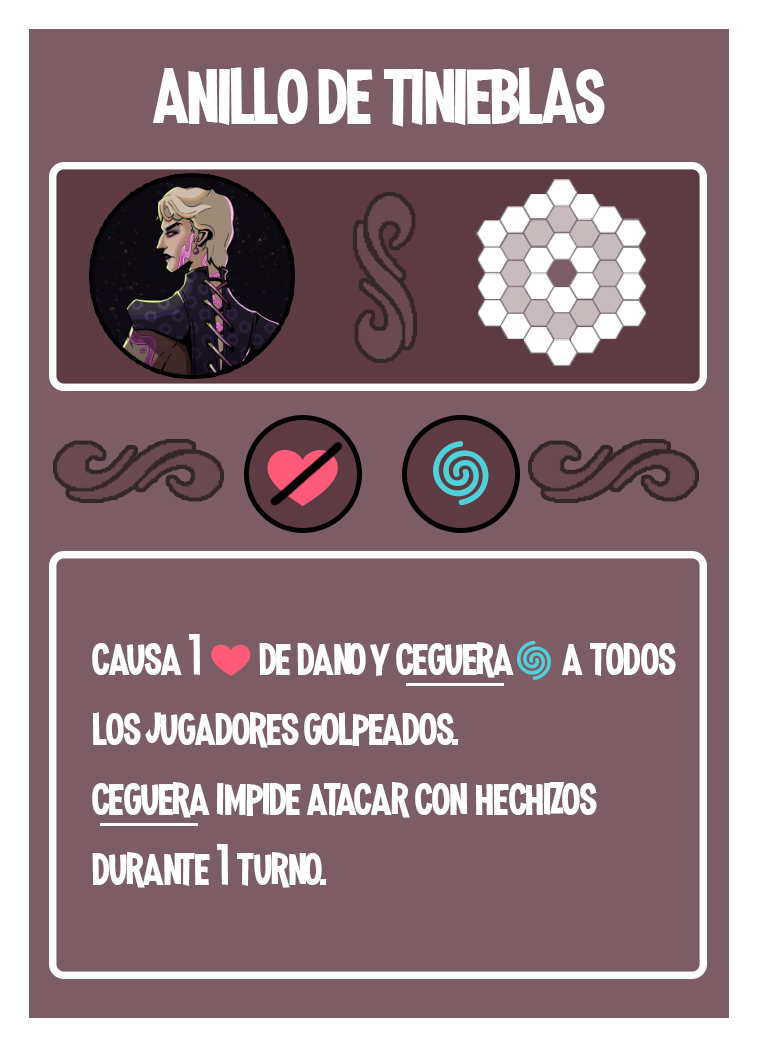
<style>
.page{position:relative;width:758px;height:1047px;background:#7d5d65}
.page>*{position:absolute;margin:0}
.t1{font:100px "MadnessHyperactive";color:#ffffff}
.t2{font:58.3px "MadnessHyperactive";color:#ffffff}
.t3{font:41.7px "EmojiOneColor";color:#ffffff}
</style>
<div class="page">
<p class="t1" style="left:153px;top:67px;width:452px;height:60px">anillo de tinieblas</p>
<p class="t2" style="left:92px;top:634px;width:584px;height:254px">causa 1 <span class="t3">❤️ </span>de dano y ceguera<span class="t3">🌀</span> a todos los jugadores golpeados.<br>ceguera impide atacar con hechizos durante 1 turno.</p>
</div>
